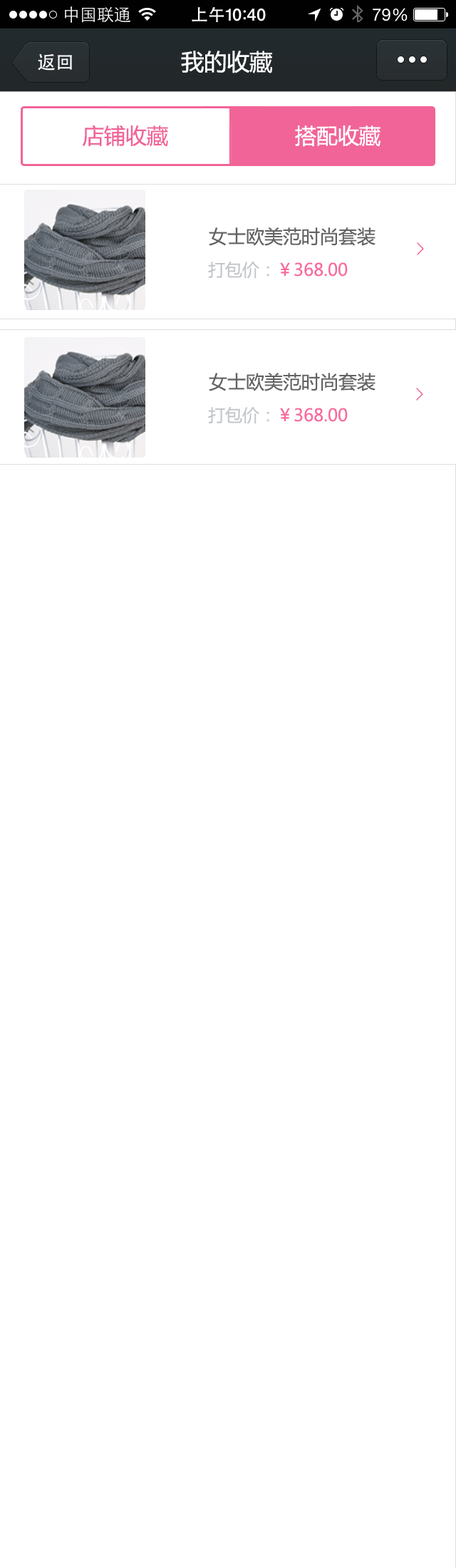
<style>
.page{position:relative;width:456px;height:1568px;background:#ffffff}
.page>*{position:absolute;margin:0}
.t1{font:22.8px "MicrosoftYaHei";color:#ffffff}
.t2{font:21.4px "MicrosoftYaHei";color:#f16498}
.t3{font:21.4px "MicrosoftYaHei";color:#ffffff}
.t4{font:18.5px "MicrosoftYaHei";color:#636363}
.t5{font:17.1px "MicrosoftYaHei";color:#f86b9f}
.t6{font:17.1px "MicrosoftYaHei";color:#c3c6cb}
</style>
<div class="page">
<p class="t1" style="left:181px;top:51px;width:91px;height:22px">我的收藏</p>
<p class="t2" style="left:83px;top:125px;width:85px;height:22px">店铺收藏</p>
<p class="t3" style="left:295px;top:125px;width:86px;height:22px">搭配收藏</p>
<p class="t4" style="left:209px;top:227px;width:167px;height:19px">女士欧美范时尚套装</p>
<p class="t5" style="left:208px;top:261px;width:140px;height:18px"><span class="t6">打包价：</span>￥368.00</p>
<p class="t4" style="left:209px;top:373px;width:167px;height:18px">女士欧美范时尚套装</p>
<p class="t5" style="left:208px;top:406px;width:140px;height:18px"><span class="t6">打包价：</span>￥368.00</p>
</div>
